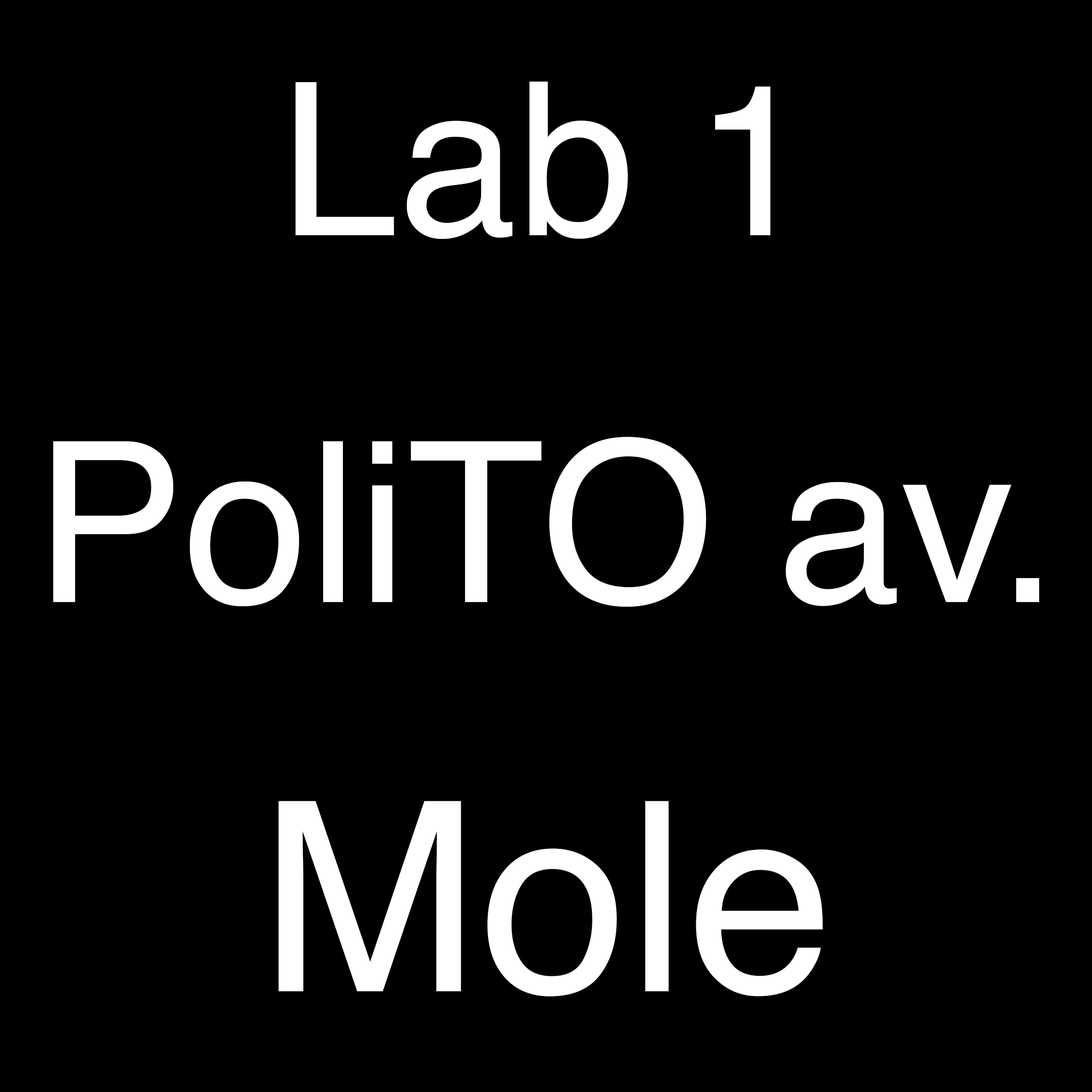
<style>
.page{position:relative;width:1092px;height:1092px;background:#000000}
.page>*{position:absolute;margin:0}
.t1{font:213.3px "Helvetica";color:#ffffff}
.t2{font:223.9px "Helvetica";color:#ffffff}
.t3{font:265.2px "Helvetica";color:#ffffff}
</style>
<div class="page">
<p class="t1" style="left:295px;top:82px;width:475px;height:157px">Lab 1</p>
<p class="t2" style="left:53px;top:437px;width:986px;height:170px">PoliTO av.</p>
<p class="t3" style="left:278px;top:801px;width:545px;height:196px">Mole</p>
</div>
